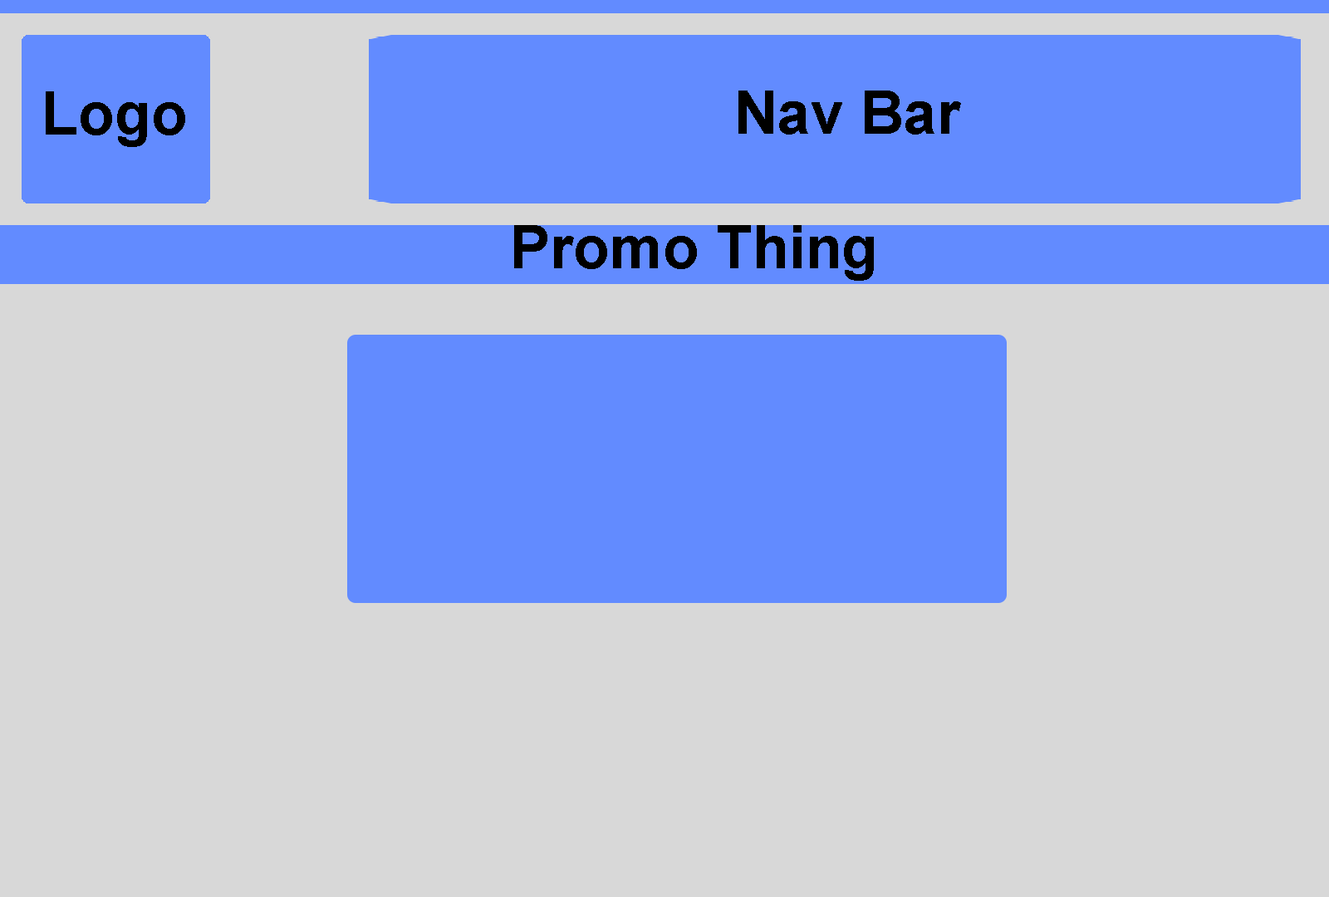
<style>
.page{position:relative;width:1329px;height:897px;background:#d8d8d8}
.page>*{position:absolute;margin:0}
.t1{font:59.8px "Arial-BoldMT";color:#000000}
</style>
<div class="page">
<p class="t1" style="left:46px;top:91px;width:139px;height:56px">Logo</p>
<p class="t1" style="left:738px;top:91px;width:223px;height:44px">Nav Bar</p>
<p class="t1" style="left:514px;top:225px;width:360px;height:56px">Promo Thing</p>
</div>
